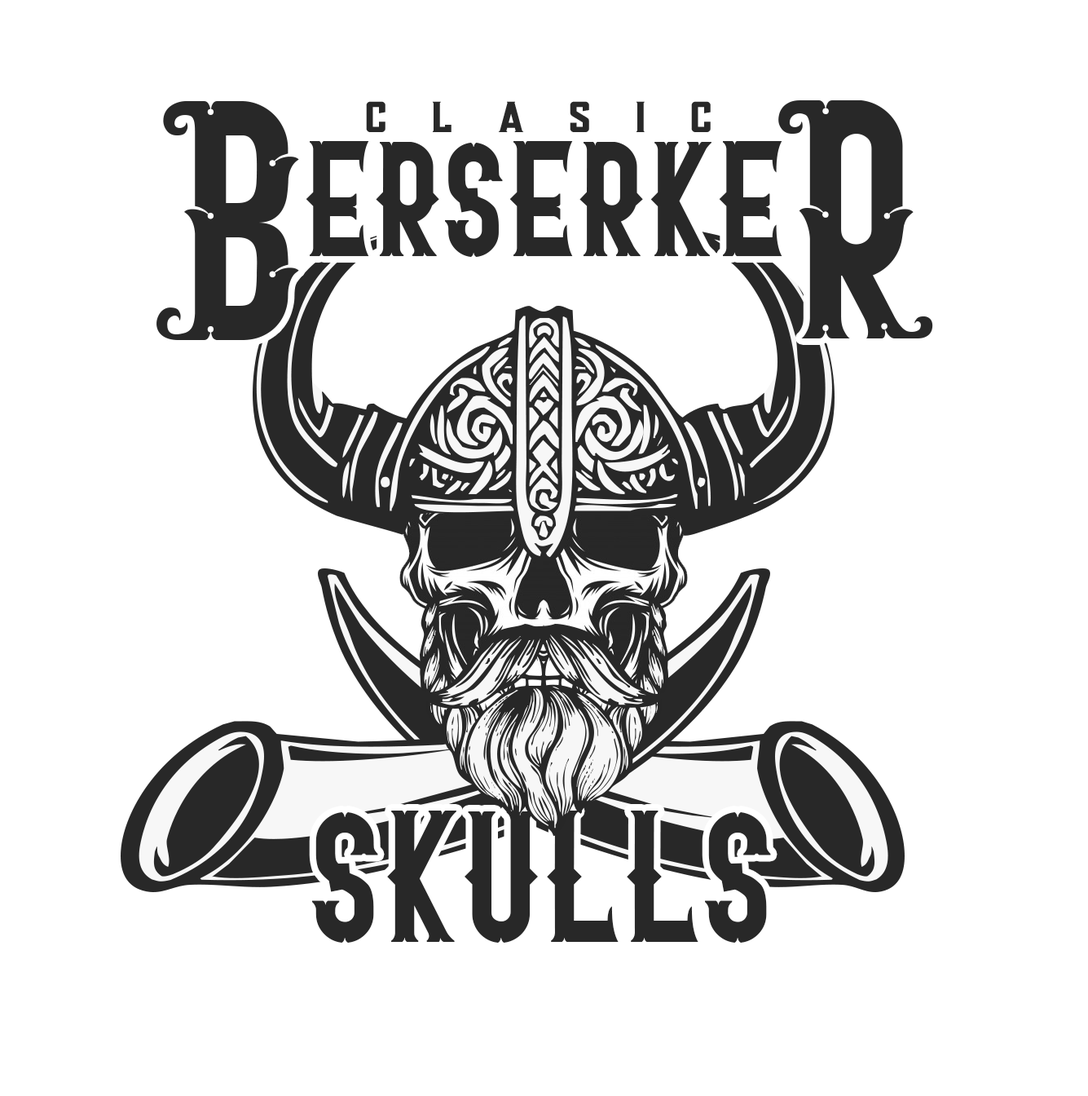
<style>
.page{position:relative;width:1088px;height:1096px;background:#ffffff}
.page>*{position:absolute;margin:0}
.t1{font:195.7px "BlacktailRegular";color:#282828}
.t2{font:43.5px "PoseyRegular";letter-spacing:0.98em;color:#282828}
.t3{font:114.1px "BlacktailRegular";color:#282828}
.t4{font:130.4px "BlacktailRegular";color:#282828}
</style>
<div class="page">
<p class="t1" style="left:157px;top:101px;width:142px;height:239px">B</p>
<p class="t2" style="left:366px;top:101px;width:345px;height:31px">CLASIC</p>
<p class="t1" style="left:779px;top:100px;width:154px;height:238px">R</p>
<p class="t3" style="left:306px;top:141px;width:477px;height:116px">erserke</p>
<p class="t4" style="left:312px;top:810px;width:459px;height:132px">skulls</p>
</div>
